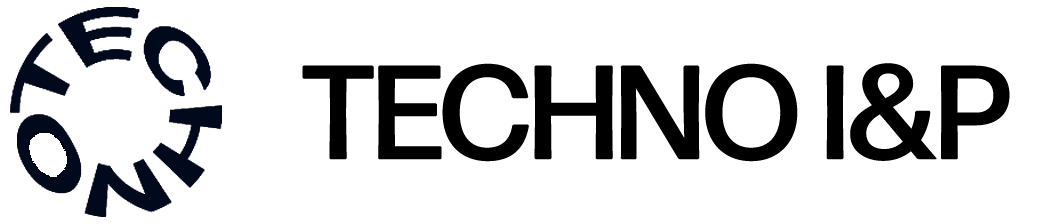
<style>
.page{position:relative;width:1050px;height:224px;background:#ffffff}
.page>*{position:absolute;margin:0}
.t1{font:133.5px "FormaDJRDisplay-Medium";color:#000000}
</style>
<div class="page">
<p class="t1" style="left:302px;top:63px;width:708px;height:99px">TECHNO I&amp;P</p>
</div>
